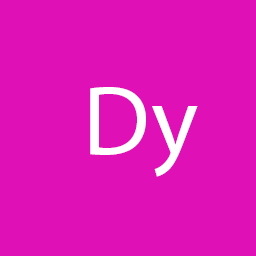
<style>
.page{position:relative;width:256px;height:256px;background:#df10b6}
.page>*{position:absolute;margin:0}
.t1{font:100px "MyriadPro-Regular";color:#ffffff}
</style>
<div class="page">
<p class="t1" style="left:90px;top:87px;width:108px;height:90px">Dy</p>
</div>
